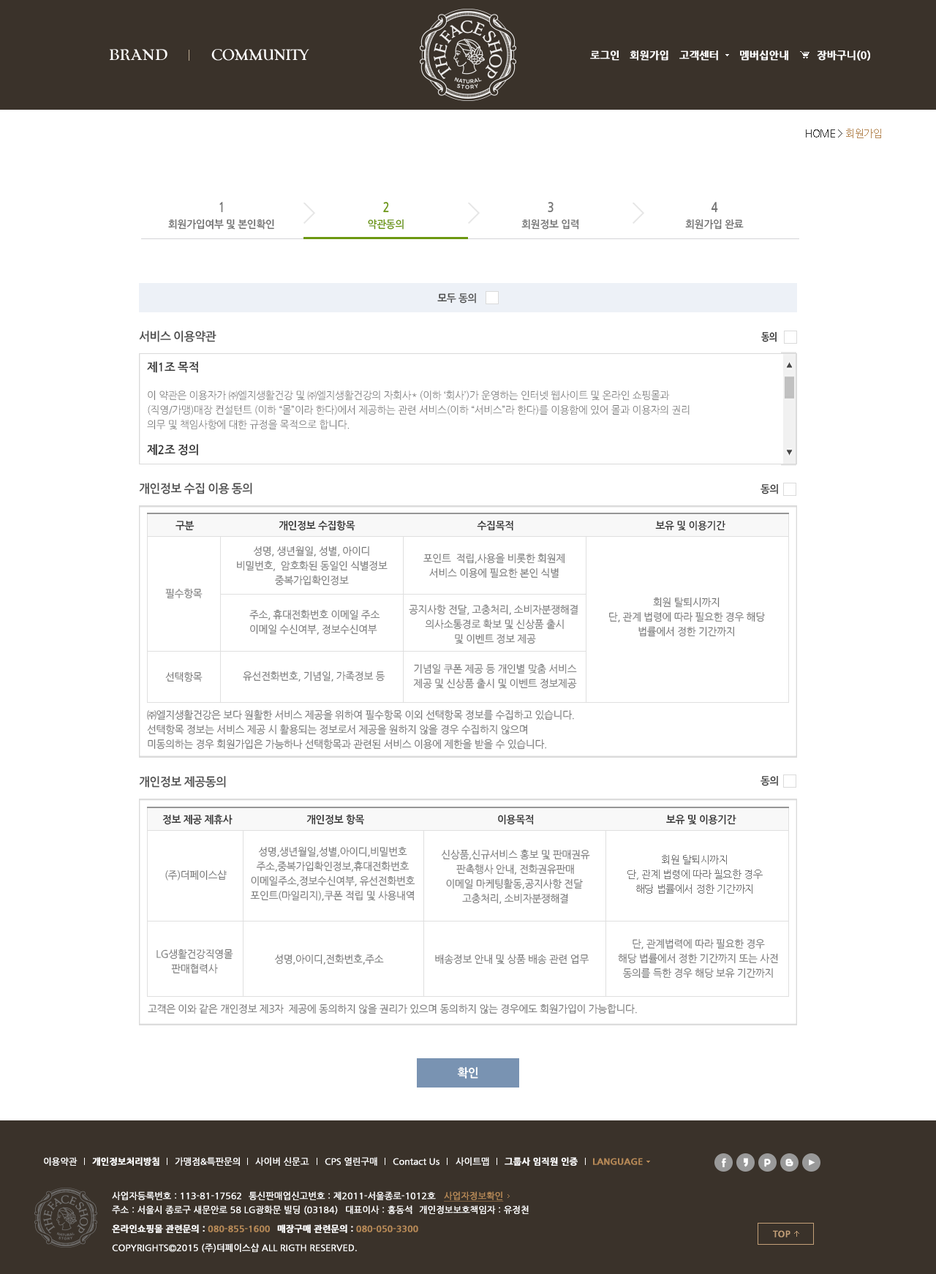
<style>
.page{position:relative;width:936px;height:1274px;background:#ffffff}
.page>*{position:absolute;margin:0}
.t1{font:10.2px "NanumGothicBold";color:#ffffff;font-weight:bold}
.t2{font:10.2px "NanumGothic";letter-spacing:-0.03em;color:#333333}
.t3{font:10.2px "NanumGothic";letter-spacing:-0.03em;color:#b68957}
.t4{font:13.2px "NanumGothicBold";letter-spacing:-0.03em;color:#737373;scale:0.85 1}
.t5{font:13.2px "NanumGothicBold";letter-spacing:-0.03em;color:#6d9811;scale:0.85 1}
.t6{font:10.2px "NanumGothicBold";letter-spacing:-0.03em;color:#737373}
.t7{font:10.2px "NanumGothicBold";letter-spacing:-0.03em;color:#6d9811}
.t8{font:10.2px "NanumGothicBold";letter-spacing:-0.03em;color:#4e4e4e}
.t9{font:11.7px "NanumGothicBold";letter-spacing:-0.03em;color:#4e4e4e}
.t10{font:10.2px "NanumGothicBold";letter-spacing:-0.03em;color:#333333;scale:0.85 1}
.t11{font:10.2px/14.6px "NanumGothic";letter-spacing:-0.03em;color:#737373}
.t12{font:11.7px/14.6px "NanumGothicBold";letter-spacing:-0.03em;color:#333333}
.t13{font:11.7px "NanumGothicBold";letter-spacing:-0.03em;color:#333333}
.t14{font:10.2px "NanumGothicBold";letter-spacing:-0.03em;color:#333333}
.t15{font:10.2px "NanumGothic";letter-spacing:-0.03em;color:#737373}
.t16{font:11.7px "NanumGothicBold";letter-spacing:-0.03em;color:#ffffff}
.t17{font:8.8px "NanumGothic";color:#ffffff;font-weight:bold}
.t18{font:8.8px "NanumGothicBold";color:#ffffff;font-weight:bold}
.t19{font:8.8px "NanumGothicBold";color:#b68957;font-weight:bold}
.t20{font:8.8px "NanumGothic";color:#b68957;font-weight:bold;text-decoration:underline}
</style>
<div class="page">
<p class="t1" style="left:590px;top:50px;width:29px;height:11px">로그인</p>
<p class="t1" style="left:630px;top:50px;width:38px;height:11px">회원가입</p>
<p class="t1" style="left:679px;top:50px;width:39px;height:11px">고객센터</p>
<p class="t1" style="left:740px;top:50px;width:48px;height:11px">멤버십안내</p>
<p class="t1" style="left:817px;top:50px;width:53px;height:11px">장바구니(0)</p>
<p class="t2" style="left:806px;top:129px;width:75px;height:9px">HOME &gt; <span class="t3">회원가입</span></p>
<p class="t4" style="left:219px;top:202px;width:4px;height:11px">1</p>
<p class="t5" style="left:383px;top:202px;width:6px;height:11px">2</p>
<p class="t4" style="left:548px;top:202px;width:6px;height:11px">3</p>
<p class="t4" style="left:711px;top:202px;width:7px;height:11px">4</p>
<p class="t6" style="left:168px;top:219px;width:106px;height:11px">회원가입여부 및 본인확인</p>
<p class="t7" style="left:368px;top:219px;width:36px;height:11px">약관동의</p>
<p class="t6" style="left:521px;top:219px;width:58px;height:11px">회원정보 입력</p>
<p class="t6" style="left:685px;top:219px;width:59px;height:11px">회원가입 완료</p>
<p class="t8" style="left:437px;top:293px;width:39px;height:10px">모두 동의</p>
<p class="t9" style="left:139px;top:331px;width:77px;height:11px">서비스 이용약관</p>
<p class="t10" style="left:761px;top:331px;width:16px;height:11px">동의</p>
<p class="t11" style="left:147px;top:361px;width:543px;height:69px"><span class="t12">제1조 목적<br><br></span>이 약관은 이용자가 ㈜엘지생활건강 및 ㈜엘지생활건강의 자회사* (이하 ‘회사’)가 운영하는 인터넷 웹사이트 및 온라인 쇼핑몰과<br>(직영/가맹)매장 컨설턴트 (이하 “몰”이라 한다)에서 제공하는 관련 서비스(이하 “서비스”라 한다)를 이용함에 있어 몰과 이용자의 권리<br>의무 및 책임사항에 대한 규정을 목적으로 합니다.</p>
<p class="t13" style="left:147px;top:444px;width:51px;height:12px">제2조 정의</p>
<p class="t9" style="left:139px;top:483px;width:113px;height:11px">개인정보 수집 이용 동의</p>
<p class="t14" style="left:761px;top:484px;width:17px;height:10px">동의</p>
<p class="t14" style="left:176px;top:521px;width:19px;height:9px">구분</p>
<p class="t14" style="left:279px;top:520px;width:76px;height:11px">개인정보 수집항목</p>
<p class="t14" style="left:477px;top:520px;width:36px;height:11px">수집목적</p>
<p class="t14" style="left:655px;top:521px;width:70px;height:10px">보유 및 이용기간</p>
<p class="t11" style="left:237px;top:546px;width:151px;height:40px;text-align:center">성명, 생년월일, 성별, 아이디<br>비밀번호,  암호화된 동일인 식별정보<br> 중복가입확인정보</p>
<p class="t11" style="left:423px;top:553px;width:142px;height:25px;text-align:center">포인트  적립,사용을 비롯한 회원제<br>서비스 이용에 필요한 본인 식별</p>
<p class="t15" style="left:165px;top:588px;width:38px;height:11px">필수항목</p>
<p class="t11" style="left:409px;top:604px;width:169px;height:40px;text-align:center">공지사항 전달, 고충처리, 소비자분쟁해결 <br>의사소통경로 확보 및 신상품 출시<br>및 이벤트 정보 제공</p>
<p class="t11" style="left:609px;top:597px;width:156px;height:40px;text-align:center">회원 탈퇴시까지<br>단, 관계 법령에 따라 필요한 경우 해당<br>법률에서 정한 기간까지</p>
<p class="t11" style="left:249px;top:609px;width:131px;height:26px">주소, 휴대전화번호 이메일 주소<br>이메일 수신여부, 정보수신여부</p>
<p class="t11" style="left:413px;top:663px;width:164px;height:26px;text-align:center">기념일 쿠폰 제공 등 개인별 맞춤 서비스<br>제공 및 신상품 출시 및 이벤트 정보제공</p>
<p class="t15" style="left:165px;top:671px;width:38px;height:11px">선택항목</p>
<p class="t15" style="left:243px;top:671px;width:142px;height:11px">유선전화번호, 기념일, 가족정보 등</p>
<p class="t11" style="left:147px;top:709px;width:427px;height:41px">㈜엘지생활건강은 보다 원활한 서비스 제공을 위하여 필수항목 이외 선택항목 정보를 수집하고 있습니다.<br>선택항목 정보는 서비스 제공 시 활용되는 정보로서 제공을 원하지 않을 경우 수집하지 않으며<br>미동의하는 경우 회원가입은 가능하나 선택항목과 관련된 서비스 이용에 제한을 받을 수 있습니다.</p>
<p class="t9" style="left:139px;top:776px;width:87px;height:12px">개인정보 제공동의</p>
<p class="t14" style="left:761px;top:776px;width:17px;height:10px">동의</p>
<p class="t14" style="left:162px;top:814px;width:71px;height:11px">정보 제공 제휴사</p>
<p class="t14" style="left:306px;top:814px;width:58px;height:11px">개인정보 항목</p>
<p class="t14" style="left:498px;top:814px;width:36px;height:11px">이용목적</p>
<p class="t14" style="left:666px;top:814px;width:70px;height:11px">보유 및 이용기간</p>
<p class="t11" style="left:250px;top:846px;width:165px;height:55px;text-align:center">성명,생년월일,성별,아이디,비밀번호<br>주소,중복가입확인정보,휴대전화번호<br>이메일주소,정보수신여부, 유선전화번호<br>포인트(마일리지),쿠폰 적립 및 사용내역</p>
<p class="t11" style="left:441px;top:849px;width:149px;height:55px;text-align:center">신상품,신규서비스 홍보 및 판매권유<br>판촉행사 안내, 전화권유판매<br>이메일 마케팅활동,공지사항 전달 <br>고충처리, 소비자분쟁해결</p>
<p class="t11" style="left:627px;top:855px;width:136px;height:39px;text-align:center">회원 탈퇴시까지<br>단, 관계 법령에 따라 필요한 경우<br>해당 법률에서 정한 기간까지</p>
<p class="t15" style="left:165px;top:870px;width:62px;height:10px">(주)더페이스샵</p>
<p class="t11" style="left:618px;top:938px;width:160px;height:40px;text-align:center">단, 관계법력에 따라 필요한 경우<br>해당 법률에서 정한 기간까지 또는 사전<br>동의를 득한 경우 해당 보유 기간까지</p>
<p class="t11" style="left:156px;top:948px;width:77px;height:26px;text-align:center">LG생활건강직영몰<br>판매협력사</p>
<p class="t15" style="left:274px;top:954px;width:110px;height:11px">성명,아이디,전화번호,주소</p>
<p class="t15" style="left:435px;top:954px;width:154px;height:11px">배송정보 안내 및 상품 배송 관련 업무</p>
<p class="t15" style="left:148px;top:1003px;width:489px;height:11px">고객은 이와 같은 개인정보 제3자  제공에 동의하지 않을 권리가 있으며 동의하지 않는 경우에도 회원가입이 가능합니다.</p>
<p class="t16" style="left:457px;top:1067px;width:21px;height:12px">확인</p>
<p class="t17" style="left:44px;top:1157px;width:34px;height:9px">이용약관</p>
<p class="t18" style="left:92px;top:1157px;width:67px;height:9px">개인정보처리방침</p>
<p class="t17" style="left:175px;top:1157px;width:65px;height:9px">가맹점&amp;특판문의</p>
<p class="t17" style="left:255px;top:1157px;width:54px;height:9px">사이버 신문고</p>
<p class="t17" style="left:325px;top:1157px;width:52px;height:9px">CPS 열린구매</p>
<p class="t17" style="left:393px;top:1158px;width:47px;height:7px">Contact Us</p>
<p class="t17" style="left:456px;top:1157px;width:33px;height:9px">사이트맵</p>
<p class="t18" style="left:505px;top:1157px;width:73px;height:9px">그룹사 임직원 인증</p>
<p class="t19" style="left:593px;top:1158px;width:50px;height:7px">LANGUAGE</p>
<p class="t17" style="left:112px;top:1191px;width:129px;height:9px">사업자등록번호 : 113-81-17562</p>
<p class="t17" style="left:249px;top:1191px;width:187px;height:9px">통신판매업신고번호 : 제2011-서울종로-1012호</p>
<p class="t20" style="left:444px;top:1191px;width:60px;height:11px">사업자정보확인</p>
<p class="t17" style="left:112px;top:1205px;width:226px;height:10px">주소 : 서울시 종로구 새문안로 58 LG광화문 빌딩 (03184)</p>
<p class="t17" style="left:346px;top:1205px;width:66px;height:9px">대표이사 : 홍동석</p>
<p class="t17" style="left:419px;top:1205px;width:110px;height:9px">개인정보보호책임자 : 유정천</p>
<p class="t18" style="left:112px;top:1224px;width:158px;height:9px">온라인쇼핑몰 관련문의 : <span class="t19">080-855-1600</span></p>
<p class="t19" style="left:277px;top:1224px;width:141px;height:9px"><span class="t18">매장구매 관련문의 : </span>080-050-3300</p>
<p class="t17" style="left:112px;top:1243px;width:245px;height:10px">COPYRIGHTS©2015 (주)더페이스샵 ALL RIGTH RESERVED.</p>
</div>
